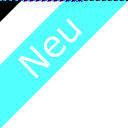
<style>
.page{position:relative;width:128px;height:128px;background:#ffffff}
.page>*{position:absolute;margin:0}
.t1{font:36.2px "Verdana";color:#ffffff}
</style>
<div class="page">
<p class="t1" style="left:18px;top:17px;width:65px;height:61px;rotate:-45deg">Neu</p>
</div>
